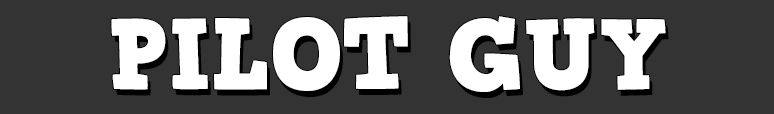
<style>
.page{position:relative;width:774px;height:114px;background:#333333}
.page>*{position:absolute;margin:0}
.t1{font:100px "HVDComicSerifPro";color:#ffffff}
</style>
<div class="page">
<p class="t1" style="left:111px;top:16px;width:555px;height:76px">PILOT GUY</p>
</div>
